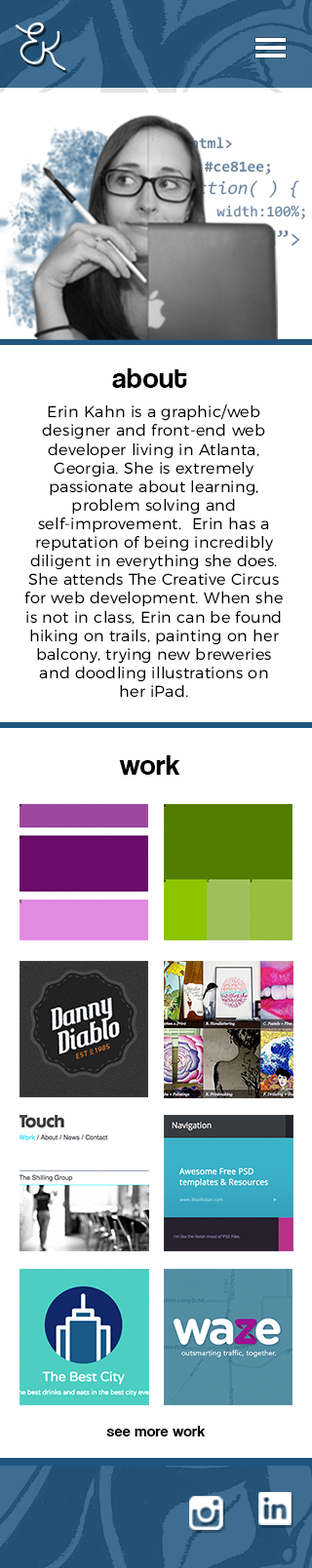
<style>
.page{position:relative;width:312px;height:1568px;background:#ffffff}
.page>*{position:absolute;margin:0}
.t1{font:15.4px "Consolas-Bold";color:#67849f}
.t2{font:15.4px "Consolas-Bold"}
.t3{font:18.5px "Consolas-Italic"}
.t4{font:15px "Consolas";color:#67849f}
.t5{font:29.3px "CoolveticaRg-Regular";letter-spacing:0.02em;color:#010101}
.t6{font:15.6px/18.6px "Montserrat-Light";letter-spacing:0.02em;color:#000000}
.t7{font:15.6px "CoolveticaRg-Regular";letter-spacing:0.02em;color:#010101}
</style>
<div class="page">
<p class="t1" style="left:182px;top:137px;width:50px;height:12px">&lt;html&gt;</p>
<p class="t2" style="left:154px;top:161px;width:117px;height:13px">color:#ce81ee;</p>
<p class="t3" style="left:165px;top:180px;width:134px;height:19px">function( ) {</p>
<p class="t4" style="left:216px;top:206px;width:89px;height:13px">width:100%;</p>
<p class="t5" style="left:112px;top:368px;width:75px;height:20px">about</p>
<p class="t6" style="left:24px;top:403px;width:259px;height:295px;text-align:center">Erin Kahn is a graphic/web designer and front-end web developer living in Atlanta, Georgia. She is extremely passionate about learning, problem solving and self-improvement.  Erin has a reputation of being incredibly diligent in everything she does. She attends The Creative Circus for web development. When she is not in class, Erin can be found hiking on trails, painting on her balcony, trying new breweries and doodling illustrations on <br>her iPad.</p>
<p class="t5" style="left:119px;top:755px;width:61px;height:20px">work</p>
<p class="t7" style="left:106px;top:1426px;width:100px;height:10px">see more work</p>
</div>
